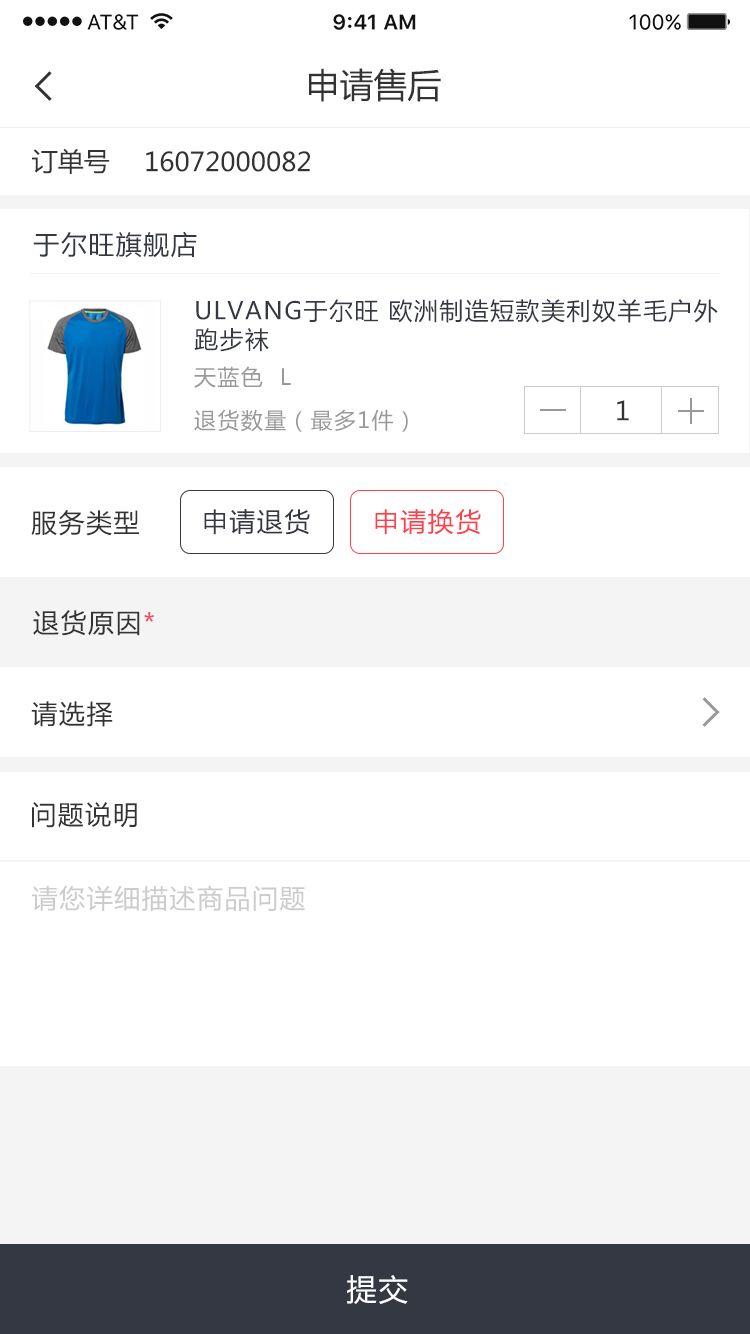
<style>
.page{position:relative;width:750px;height:1334px;background:#ffffff}
.page>*{position:absolute;margin:0}
.t1{font:34px "MicrosoftYaHei";color:#333333}
.t2{font:26px "MicrosoftYaHei";color:#333333}
.t3{font:26px "MicrosoftYaHei";letter-spacing:0.06em;color:#343843}
.t4{font:24px "MicrosoftYaHei";letter-spacing:0.06em;color:#343843}
.t5{font:22px "MicrosoftYaHei";letter-spacing:0.06em;color:#999999}
.t6{font:26px "MicrosoftYaHei";letter-spacing:0.06em;color:#333333}
.t7{font:26px "MicrosoftYaHei";letter-spacing:0.06em;color:#fe404c}
.t8{font:26px "MicrosoftYaHei";letter-spacing:0.06em;color:#cccccc}
.t9{font:30px "MicrosoftYaHei";letter-spacing:0.06em;color:#ffffff}
</style>
<div class="page">
<p class="t1" style="left:309px;top:68px;width:132px;height:34px">申请售后</p>
<p class="t2" style="left:32px;top:148px;width:78px;height:26px">订单号</p>
<p class="t2" style="left:146px;top:151px;width:164px;height:21px">16072000082</p>
<p class="t3" style="left:33px;top:231px;width:164px;height:27px">于尔旺旗舰店</p>
<p class="t4" style="left:194px;top:299px;width:524px;height:53px">ULVANG于尔旺 欧洲制造短款美利奴羊毛户外跑步袜</p>
<p class="t5" style="left:194px;top:366px;width:97px;height:22px">天蓝色  L</p>
<p class="t6" style="left:617px;top:400px;width:12px;height:21px">1</p>
<p class="t5" style="left:194px;top:409px;width:214px;height:23px">退货数量（最多1件）</p>
<p class="t6" style="left:31px;top:510px;width:108px;height:26px">服务类型</p>
<p class="t3" style="left:204px;top:509px;width:106px;height:26px">申请退货</p>
<p class="t7" style="left:375px;top:509px;width:106px;height:26px">申请换货</p>
<p class="t6" style="left:33px;top:610px;width:121px;height:26px">退货原因<span class="t7">*</span></p>
<p class="t6" style="left:31px;top:701px;width:82px;height:26px">请选择</p>
<p class="t6" style="left:32px;top:802px;width:105px;height:26px">问题说明</p>
<p class="t8" style="left:32px;top:885px;width:273px;height:27px">请您详细描述商品问题</p>
<p class="t9" style="left:347px;top:1275px;width:61px;height:29px">提交</p>
</div>
